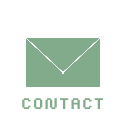
<style>
.page{position:relative;width:128px;height:128px;background:#ffffff}
.page>*{position:absolute;margin:0}
.t1{font:24px "BitsyButton-v2";letter-spacing:0.08em;color:#81ab8a;font-weight:bold}
</style>
<div class="page">
<p class="t1" style="left:22px;top:98px;width:81px;height:11px">CONTACT</p>
</div>
